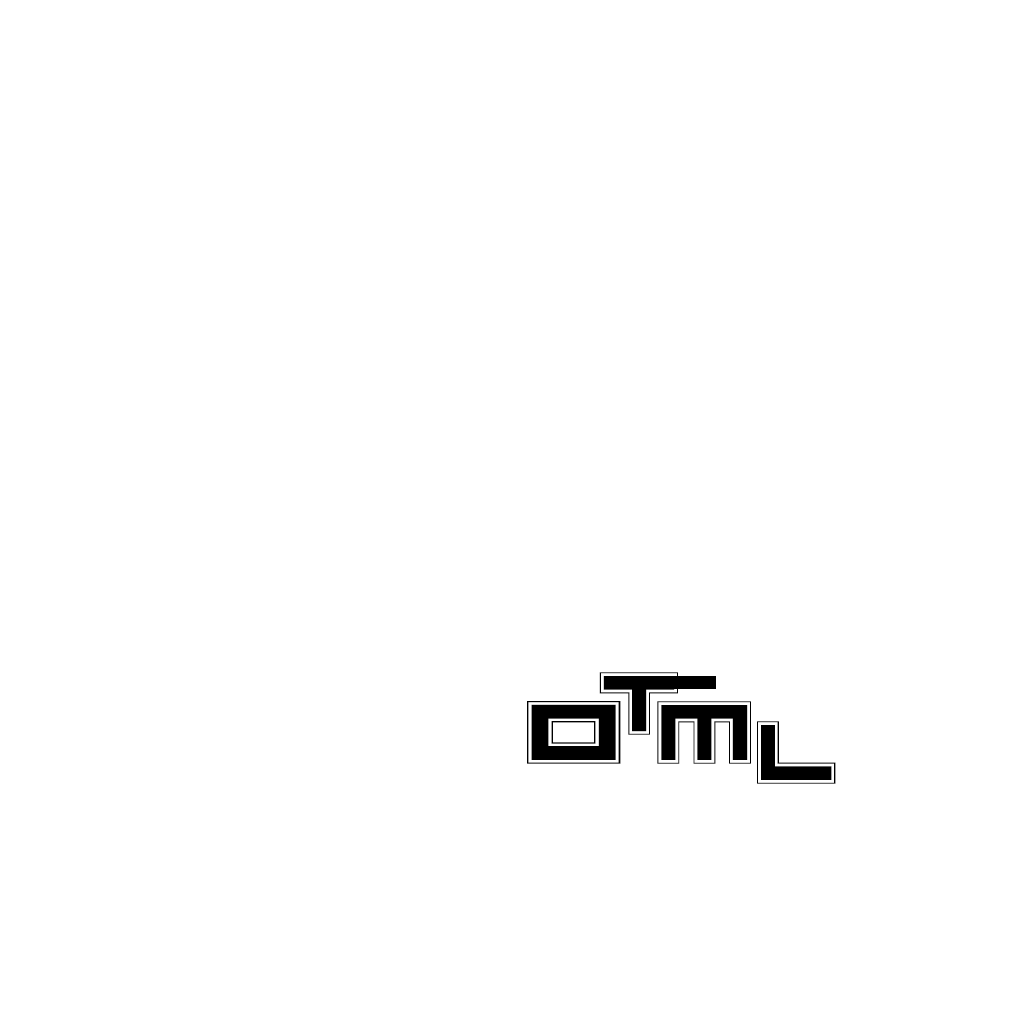
<style>
.page{position:relative;width:1024px;height:1024px;background:#ffffff}
.page>*{position:absolute;margin:0}
.t1{font:100px "AvengerCollege";color:#000000}
.t2{font:100px "AvengerCollege";color:#000000;scale:1.19 1}
</style>
<div class="page">
<p class="t1" style="left:599px;top:672px;width:79px;height:63px">T</p>
<p class="t2" style="left:527px;top:701px;width:94px;height:63px">O</p>
<p class="t1" style="left:657px;top:701px;width:94px;height:63px">M</p>
<p class="t1" style="left:757px;top:721px;width:79px;height:63px">L</p>
</div>
